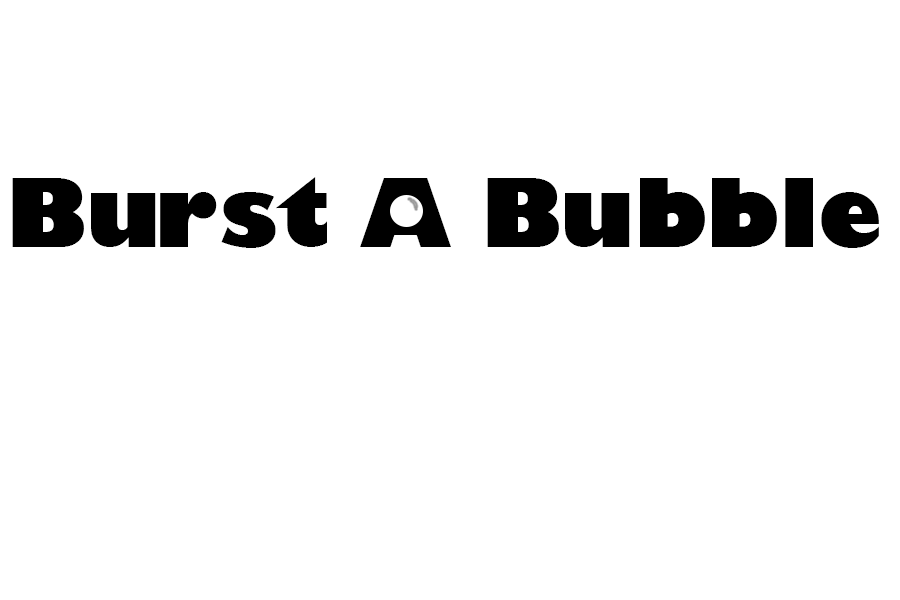
<style>
.page{position:relative;width:900px;height:600px;background:#ffffff}
.page>*{position:absolute;margin:0}
.t1{font:91.7px "GillSans-UltraBold";color:#000000}
</style>
<div class="page">
<p class="t1" style="left:12px;top:177px;width:867px;height:71px">Burst A Bubble</p>
</div>
